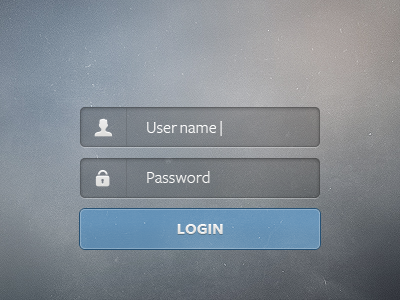
<style>
.page{position:relative;width:400px;height:300px}
.page>*{position:absolute;margin:0}
.t1{font:17px/50px "FreightSansBook";color:#ffffff}
.t2{font:16px "FreightSansBold";color:#e7e7e6}
</style>
<div class="page">
<p class="t1" style="left:147px;top:121px;width:75px;height:62px">User name |<br>Password</p>
<p class="t2" style="left:177px;top:224px;width:46px;height:10px">LOGIN</p>
</div>
